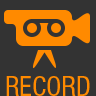
<style>
.page{position:relative;width:96px;height:96px;background:#333333}
.page>*{position:absolute;margin:0}
.t1{font:28px "HelveticaNeueLTStd-Cn";color:#ff8a00;text-transform:uppercase}
</style>
<div class="page">
<p class="t1" style="left:6px;top:76px;width:84px;height:20px">RECORD</p>
</div>
